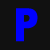
<style>
.page{position:relative;width:50px;height:50px;background:#111111}
.page>*{position:absolute;margin:0}
.t1{font:48px "AbadiMT-CondensedExtraBold";color:#0000ff}
</style>
<div class="page">
<p class="t1" style="left:16px;top:8px;width:22px;height:34px">P</p>
</div>
